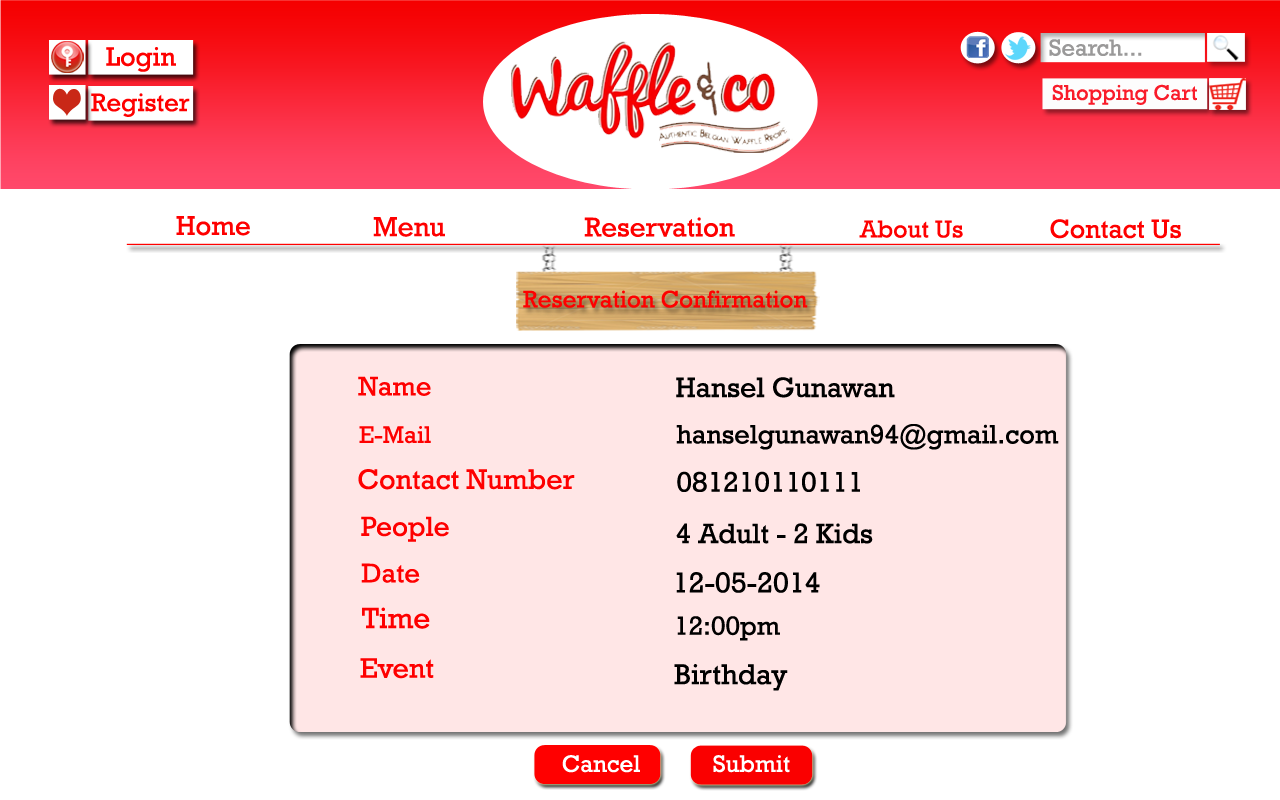
<style>
.page{position:relative;width:1280px;height:800px;background:#ffffff}
.page>*{position:absolute;margin:0}
.t1{font:27.5px "Rockwell";color:#fe0000}
.t2{font:28px "Rockwell";color:#fe0000}
.t3{font:27.6px "Rockwell";color:#fe0000}
.t4{font:24.9px "Rockwell";color:#fe0000}
.t5{font:26.7px "Rockwell";color:#fe0000}
.t6{font:24.2px "Rockwell";color:#fe0000}
.t7{font:27.2px "Rockwell";color:#fe0000}
.t8{font:28.5px "Rockwell";color:#000000}
.t9{font:27.1px "Rockwell";color:#000000}
.t10{font:24.3px "Rockwell";color:#fe0000}
.t11{font:28.6px "Rockwell";color:#fe0000}
.t12{font:28.7px "Rockwell";color:#000000}
.t13{font:27.9px "Rockwell";color:#fe0000}
.t14{font:27.4px "Rockwell";color:#fe0000}
.t15{font:29.3px "Rockwell";color:#000000}
.t16{font:29.7px "Rockwell";color:#fe0000}
.t17{font:26.8px "Rockwell";color:#000000}
.t18{font:29.2px "Rockwell";color:#000000}
.t19{font:24.2px "Rockwell";color:#ffffff}
</style>
<div class="page">
<p class="t1" style="left:176px;top:216px;width:74px;height:20px">Home</p>
<p class="t2" style="left:373px;top:217px;width:72px;height:20px">Menu</p>
<p class="t3" style="left:584px;top:217px;width:151px;height:20px">Reservation</p>
<p class="t4" style="left:859px;top:220px;width:104px;height:18px">About Us</p>
<p class="t5" style="left:1050px;top:219px;width:131px;height:20px">Contact Us</p>
<p class="t6" style="left:523px;top:290px;width:285px;height:18px">Reservation Confirmation</p>
<p class="t7" style="left:358px;top:376px;width:73px;height:20px">Name</p>
<p class="t8" style="left:676px;top:377px;width:219px;height:21px">Hansel Gunawan</p>
<p class="t9" style="left:676px;top:424px;width:383px;height:26px">hanselgunawan94@gmail.com</p>
<p class="t10" style="left:359px;top:426px;width:72px;height:18px">E-Mail</p>
<p class="t11" style="left:358px;top:469px;width:217px;height:21px">Contact Number</p>
<p class="t12" style="left:677px;top:471px;width:183px;height:21px">081210110111</p>
<p class="t13" style="left:361px;top:516px;width:88px;height:26px">People</p>
<p class="t8" style="left:676px;top:523px;width:197px;height:21px">4 Adult - 2 Kids</p>
<p class="t14" style="left:361px;top:563px;width:59px;height:20px">Date</p>
<p class="t15" style="left:676px;top:572px;width:144px;height:21px">12-05-2014</p>
<p class="t16" style="left:362px;top:607px;width:68px;height:22px">Time</p>
<p class="t17" style="left:677px;top:616px;width:103px;height:25px">12:00pm</p>
<p class="t11" style="left:360px;top:658px;width:74px;height:21px">Event</p>
<p class="t18" style="left:674px;top:664px;width:114px;height:27px">Birthday</p>
<p class="t19" style="left:562px;top:755px;width:78px;height:18px">Cancel</p>
<p class="t19" style="left:713px;top:755px;width:77px;height:18px">Submit</p>
</div>
